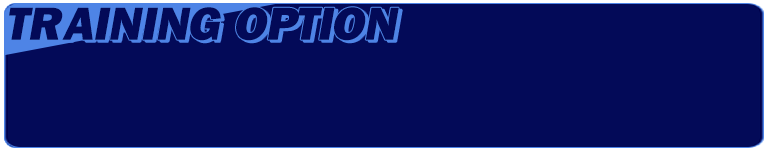
<style>
.page{position:relative;width:768px;height:150px;background:#030a58}
.page>*{position:absolute;margin:0}
.t1{font:48px "FranklinGothic-Heavy";letter-spacing:0.05em;color:#030a58;font-style:italic}
</style>
<div class="page">
<p class="t1" style="left:9px;top:7px;width:390px;height:34px">TRAINING OPTION</p>
</div>
